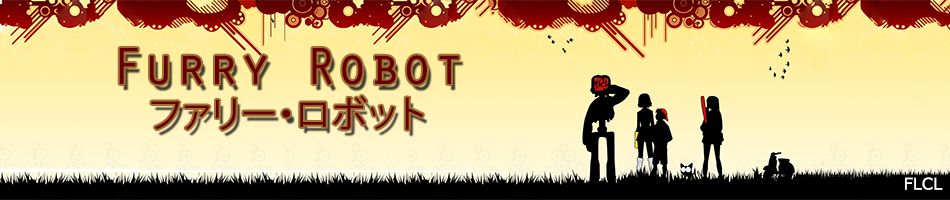
<style>
.page{position:relative;width:950px;height:200px}
.page>*{position:absolute;margin:0}
.t1{font:53.8px "OratorStd";color:#670001}
.t2{font:36.8px "KozGoPr6N-Regular";color:#670001}
.t3{font:16.2px "Verdana";color:#ffffff}
</style>
<div class="page">
<p class="t1" style="left:119px;top:48px;width:340px;height:37px">Furry Robot</p>
<p class="t2" style="left:151px;top:96px;width:272px;height:34px">ファリー・ロボット</p>
<p class="t3" style="left:905px;top:177px;width:38px;height:13px">FLCL</p>
</div>
